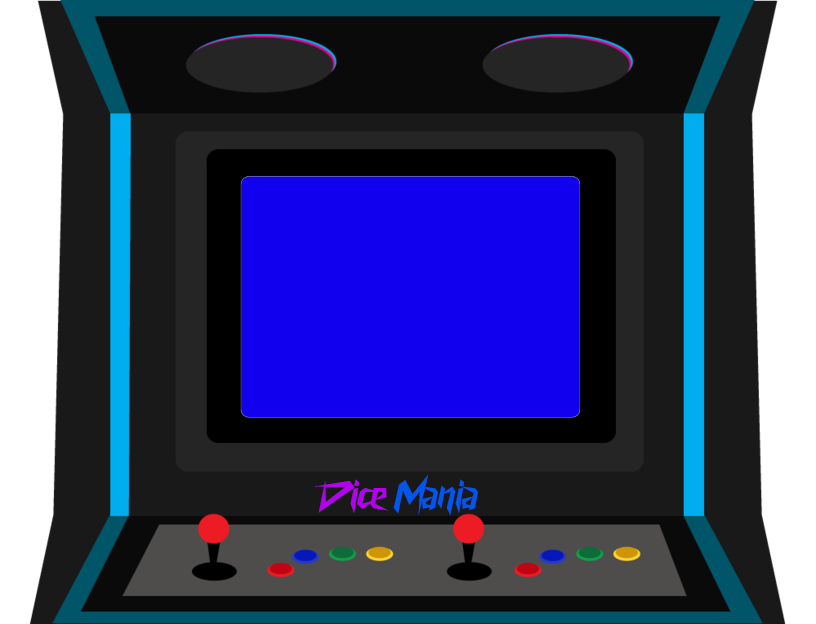
<style>
.page{position:relative;width:816px;height:624px;background:#191919}
.page>*{position:absolute;margin:0}
.t1{font:40px "CyberwayRiders";color:#0355ec}
.t2{font:40px "CyberwayRiders";color:#b300ed}
</style>
<div class="page">
<p class="t1" style="left:314px;top:474px;width:164px;height:42px"><span class="t2">Dice </span>Mania</p>
</div>
